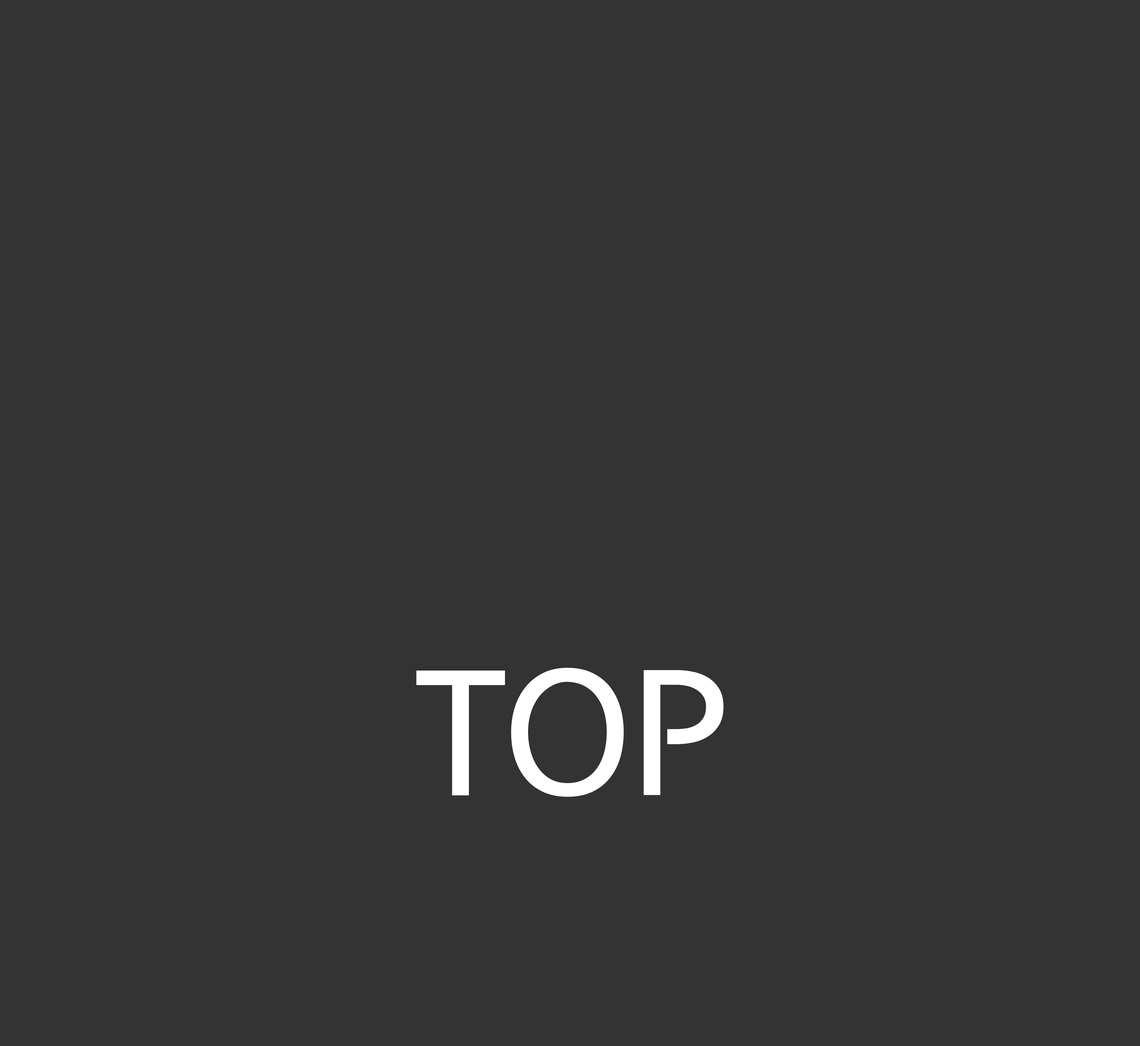
<style>
.page{position:relative;width:1140px;height:1046px;background:#333333}
.page>*{position:absolute;margin:0}
.t1{font:173.6px "SeoulNamsanB";color:#ffffff}
</style>
<div class="page">
<p class="t1" style="left:416px;top:667px;width:308px;height:130px">TOP</p>
</div>
